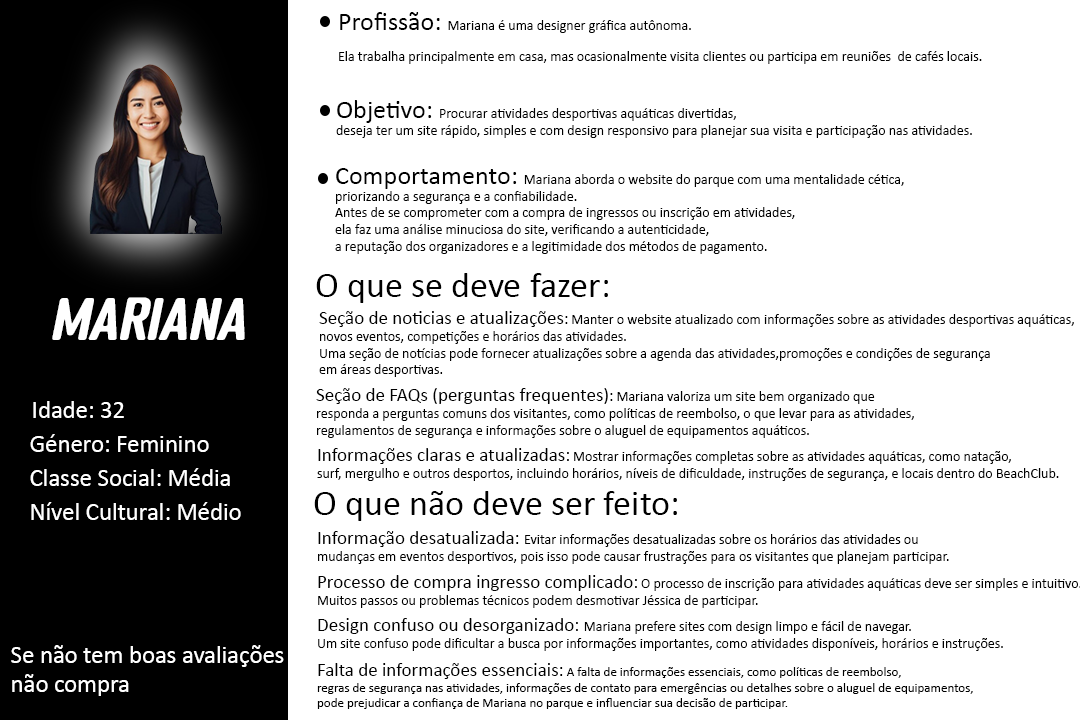
<style>
.page{position:relative;width:1080px;height:720px;background:#ffffff}
.page>*{position:absolute;margin:0}
.t1{font:14px "Calibri";color:#000000}
.t2{font:26.2px "Calibri";color:#000000}
.t3{font:36px "Calibri";color:#000000}
.t4{font:54px "PASTI-Oblique";color:#ffffff}
.t5{font:19px "Calibri";color:#000000}
.t6{font:17.3px "Calibri";color:#000000}
.t7{font:24.7px "Calibri";color:#ffffff}
.t8{font:13px "Calibri";color:#000000}
</style>
<div class="page">
<p class="t1" style="left:339px;top:12px;width:643px;height:52px"><span class="t2">Profissão: </span>Mariana é uma designer gráfica autônoma. <br>Ela trabalha principalmente em casa, mas ocasionalmente visita clientes ou participa em reuniões  de cafés locais.</p>
<p class="t1" style="left:336px;top:100px;width:636px;height:38px"><span class="t2">Objetivo: </span>Procurar atividades desportivas aquáticas divertidas, <br>deseja ter um site rápido, simples e com design responsivo para planejar sua visita e participação nas atividades.</p>
<p class="t1" style="left:335px;top:168px;width:569px;height:86px"><span class="t2">Comportamento: </span>Mariana aborda o website do parque com uma mentalidade cética, <br>priorizando a segurança e a confiabilidade.<br>Antes de se comprometer com a compra de ingressos ou inscrição em atividades, <br>ela faz uma análise minuciosa do site, verificando a autenticidade,<br>a reputação dos organizadores e a legitimidade dos métodos de pagamento.</p>
<p class="t3" style="left:316px;top:273px;width:292px;height:30px">O que se deve fazer:</p>
<p class="t4" style="left:52px;top:297px;width:193px;height:43px">Mariana</p>
<p class="t1" style="left:319px;top:311px;width:755px;height:66px"><span class="t5">Seção de noticias e atualizações</span><span class="t6">: </span>Manter o website atualizado com informações sobre as atividades desportivas aquáticas, <br>novos eventos, competições e horários das atividades.<br>Uma seção de notícias pode fornecer atualizações sobre a agenda das atividades,promoções e condições de segurança <br>em áreas desportivas.</p>
<p class="t1" style="left:316px;top:388px;width:598px;height:50px"><span class="t5">Seção de FAQs (perguntas frequentes)</span><span class="t6">: </span>Mariana valoriza um site bem organizado que <br>responda a perguntas comuns dos visitantes, como políticas de reembolso, o que levar para as atividades, <br>regulamentos de segurança e informações sobre o aluguel de equipamentos aquáticos.</p>
<p class="t7" style="left:33px;top:401px;width:91px;height:17px">Idade: 32</p>
<p class="t7" style="left:30px;top:434px;width:179px;height:18px">Género: Feminino</p>
<p class="t1" style="left:317px;top:448px;width:742px;height:33px"><span class="t5">Informações claras e atualizadas: </span>Mostrar informações completas sobre as atividades aquáticas, como natação, <br>surf, mergulho e outros desportos, incluindo horários, níveis de dificuldade, instruções de segurança, e locais dentro do BeachClub.</p>
<p class="t7" style="left:30px;top:468px;width:200px;height:18px">Classe Social: Média</p>
<p class="t3" style="left:314px;top:491px;width:363px;height:30px">O que não deve ser feito:</p>
<p class="t7" style="left:31px;top:502px;width:210px;height:18px">Nível Cultural: Médio</p>
<p class="t1" style="left:318px;top:531px;width:631px;height:33px"><span class="t5">Informação desatualizada: </span>Evitar informações desatualizadas sobre os horários das atividades ou <br>mudanças em eventos desportivos, pois isso pode causar frustrações para os visitantes que planejam participar.</p>
<p class="t1" style="left:318px;top:575px;width:764px;height:33px"><span class="t5">Processo de compra ingresso complicado: </span>O processo de inscrição para atividades aquáticas deve ser simples e intuitivo. <br>Muitos passos ou problemas técnicos podem desmotivar Jéssica de participar.</p>
<p class="t1" style="left:318px;top:618px;width:685px;height:33px"><span class="t5">Design confuso ou desorganizado: </span>Mariana prefere sites com design limpo e fácil de navegar. <br>Um site confuso pode dificultar a busca por informações importantes, como atividades disponíveis, horários e instruções.</p>
<p class="t7" style="left:11px;top:645px;width:273px;height:51px">Se não tem boas avaliações<br>não compra</p>
<p class="t8" style="left:317px;top:663px;width:656px;height:46px"><span class="t5">Falta de informações essenciais: </span>A falta de informações essenciais, como políticas de reembolso, <br>regras de segurança nas atividades, informações de contato para emergências ou detalhes sobre o aluguel de equipamentos, <br>pode prejudicar a confiança de Mariana no parque e influenciar sua decisão de participar.</p>
</div>
